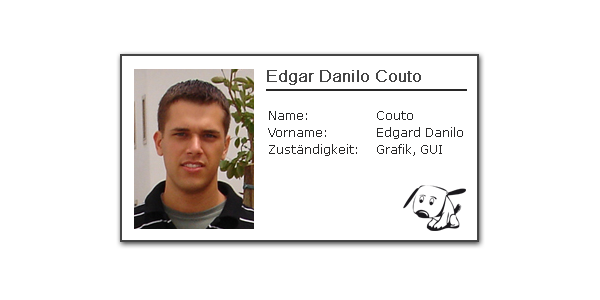
<style>
.page{position:relative;width:600px;height:300px;background:#ffffff}
.page>*{position:absolute;margin:0}
.t1{font:16px "ArialMT";color:#454545;font-weight:bold}
.t2{font:12px/17px "Verdana";color:#282727}
</style>
<div class="page">
<p class="t1" style="left:267px;top:70px;width:154px;height:15px">Edgar Danilo Couto</p>
<p class="t2" style="left:268px;top:111px;width:195px;height:45px">Name:   Couto<br>Vorname:  Edgard Danilo<br>Zuständigkeit:  Grafik, GUI</p>
</div>
